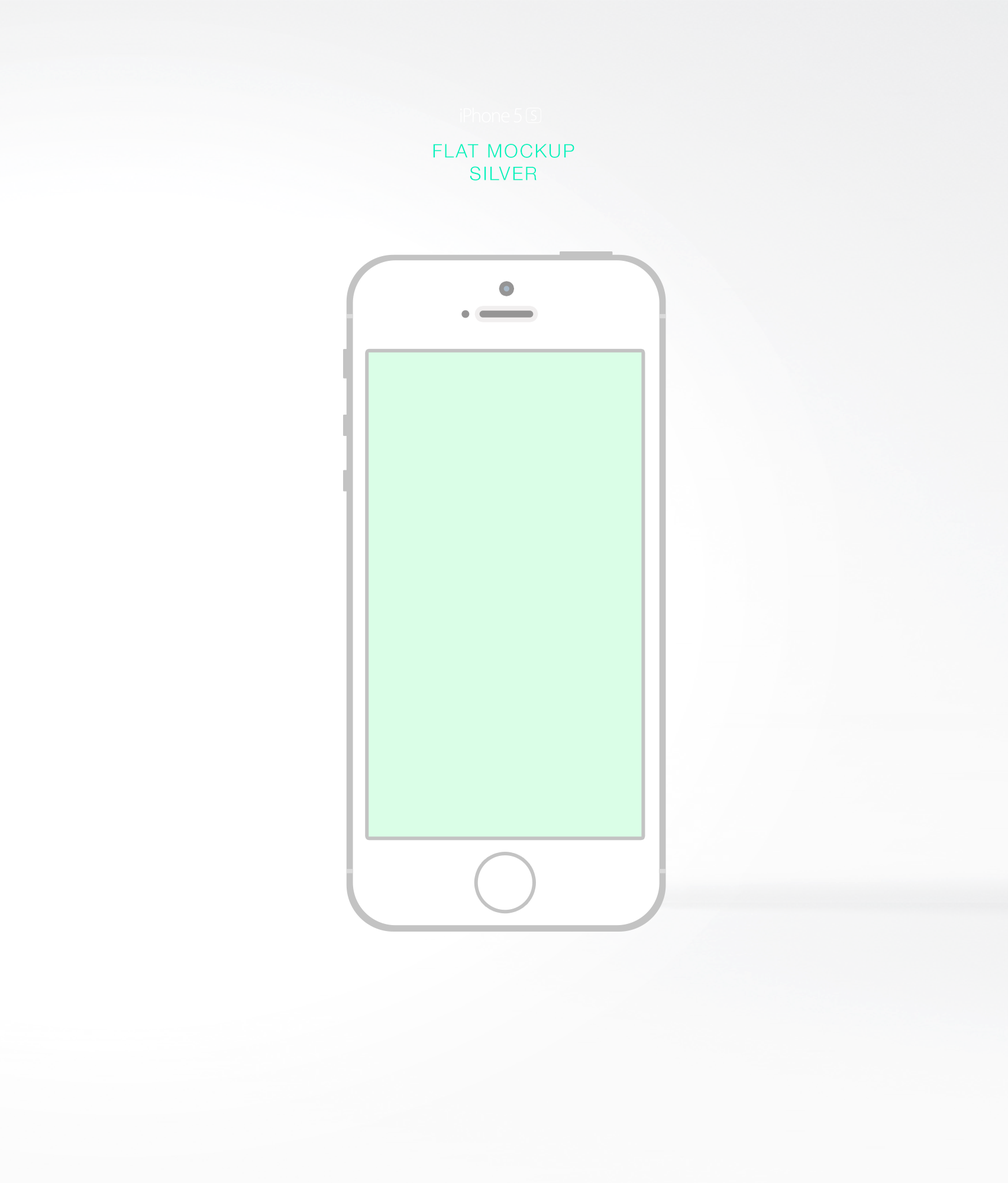
<style>
.page{position:relative;width:1008px;height:1183px;background:#ffffff}
.page>*{position:absolute;margin:0}
.t1{font:18.8px "HelveticaNeue-Light";letter-spacing:0.1em;color:#00f2bc;text-transform:uppercase}
</style>
<div class="page">
<p class="t1" style="left:433px;top:144px;width:141px;height:36px;text-align:center">Flat mockup<br>Silver</p>
</div>
